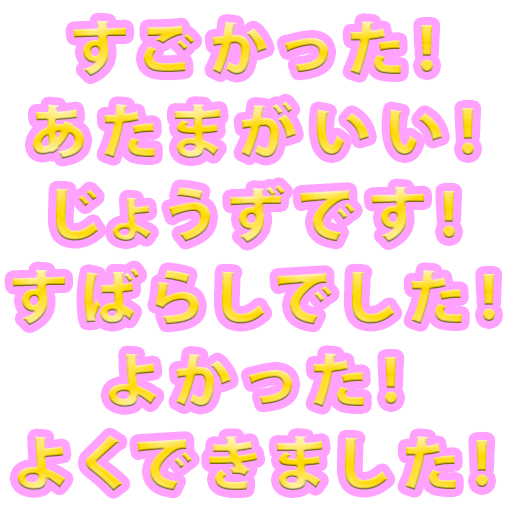
<style>
.page{position:relative;width:512px;height:512px;background:#ffffff}
.page>*{position:absolute;margin:0}
.t1{font:59.4px/83px "KozGoPr6N-Heavy";letter-spacing:0.25em}
</style>
<div class="page">
<p class="t1" style="left:12px;top:20px;width:483px;height:471px;text-align:center">すごかった!<br>あたまがいい!<br>じょうずです!<br>すばらしでした!<br>よかった!<br>よくできました!</p>
</div>
